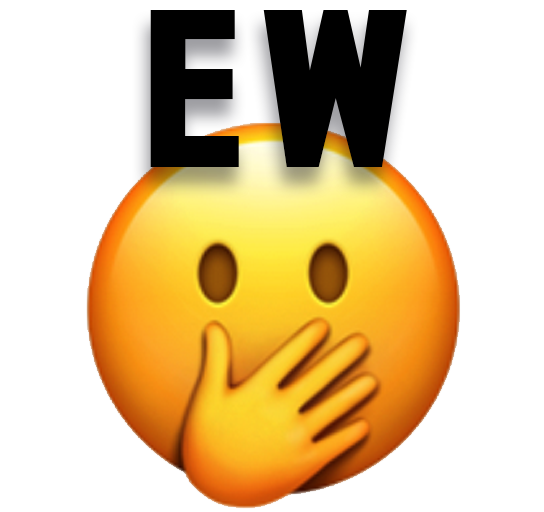
<style>
.page{position:relative;width:544px;height:512px;background:#ffffff}
.page>*{position:absolute;margin:0}
.t1{font:196.3px "WagnerZip-Change";letter-spacing:0.025em;color:#000000}
</style>
<div class="page">
<p class="t1" style="left:150px;top:10px;width:257px;height:157px">EW</p>
</div>
